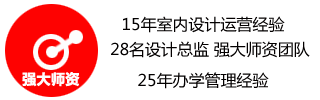
<style>
.page{position:relative;width:320px;height:100px;background:#ffffff}
.page>*{position:absolute;margin:0}
.t1{font:16px "MicrosoftYaHei";color:#030000}
.t2{font:14px "MicrosoftYaHei-Bold";color:#fefdfd;text-transform:uppercase;font-weight:bold}
</style>
<div class="page">
<p class="t1" style="left:123px;top:16px;width:162px;height:17px">15年室内设计运营经验</p>
<p class="t1" style="left:111px;top:41px;width:199px;height:17px">28名设计总监 强大师资团队</p>
<p class="t2" style="left:22px;top:72px;width:58px;height:15px">强大师资</p>
<p class="t1" style="left:138px;top:72px;width:131px;height:17px">25年办学管理经验</p>
</div>
